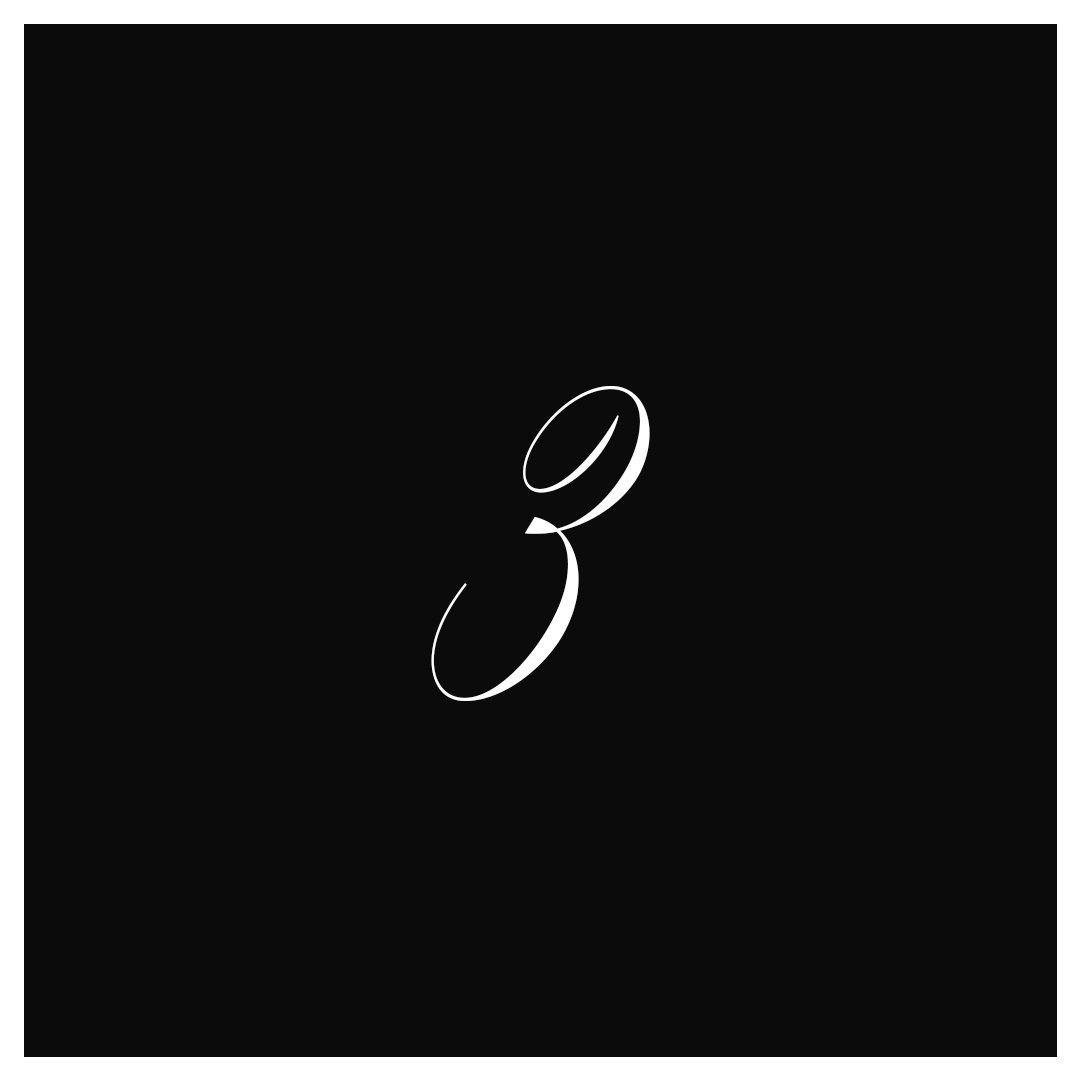
<style>
.page{position:relative;width:1080px;height:1080px;background:#0b0b0b}
.page>*{position:absolute;margin:0}
.t1{font:560px "Canora-Frente";letter-spacing:-0.01em;color:#ffffff;scale:0.72 1}
</style>
<div class="page">
<p class="t1" style="left:431px;top:386px;width:219px;height:315px">3</p>
</div>
